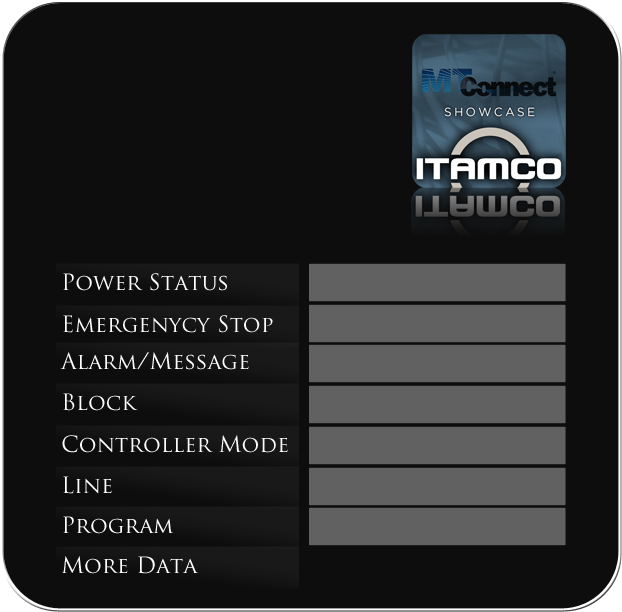
<style>
.page{position:relative;width:622px;height:612px;background:#0d0d0d}
.page>*{position:absolute;margin:0}
.t1{font:22px "TrajanPro-Regular";color:#ffffff}
</style>
<div class="page">
<p class="t1" style="left:63px;top:273px;width:164px;height:18px">Power Status</p>
<p class="t1" style="left:63px;top:315px;width:210px;height:18px">Emergenycy Stop</p>
<p class="t1" style="left:60px;top:352px;width:189px;height:18px">Alarm/Message</p>
<p class="t1" style="left:63px;top:393px;width:75px;height:18px">Block</p>
<p class="t1" style="left:62px;top:435px;width:226px;height:18px">Controller Mode</p>
<p class="t1" style="left:63px;top:476px;width:49px;height:18px">Line</p>
<p class="t1" style="left:63px;top:516px;width:111px;height:18px">Program</p>
<p class="t1" style="left:62px;top:556px;width:136px;height:18px">More Data</p>
</div>
